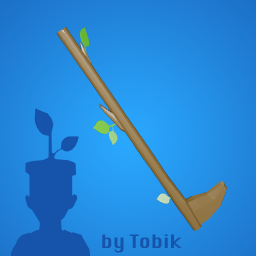
<style>
.page{position:relative;width:256px;height:256px}
.page>*{position:absolute;margin:0}
.t1{font:18px "Krungthep";letter-spacing:0.01em;color:#1554aa}
</style>
<div class="page">
<p class="t1" style="left:102px;top:234px;width:80px;height:19px">by Tobik</p>
</div>
